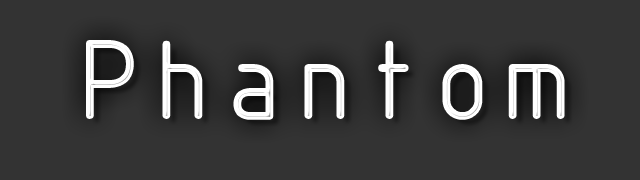
<style>
.page{position:relative;width:640px;height:180px;background:#333333}
.page>*{position:absolute;margin:0}
.t1{font:100px "ISOCT";letter-spacing:0.1em;color:#ffffff}
</style>
<div class="page">
<p class="t1" style="left:89px;top:43px;width:473px;height:74px">Phantom</p>
</div>
